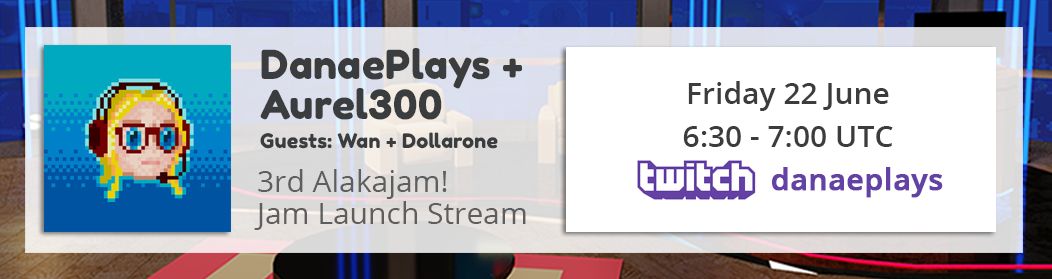
<style>
.page{position:relative;width:1052px;height:279px;background:#ffffff}
.page>*{position:absolute;margin:0}
.t1{font:20px/29px "FredokaOne-Regular";letter-spacing:0.01em;color:#3a3c3e}
.t2{font:40px/40px "FredokaOne-Regular";letter-spacing:0.01em;color:#3a3c3e}
.t3{font:30px/43px "OpenSans-Semibold";color:#3a3c3e}
.t4{font:30px/43px "OpenSans-Semibold";color:#6441a5;font-weight:bold}
.t5{font:30px/32px "OpenSans";color:#5e5e5e}
</style>
<div class="page">
<p class="t1" style="left:260px;top:48px;width:262px;height:101px"><span class="t2">DanaePlays +<br>Aurel300<br></span>Guests: Wan + Dollarone</p>
<p class="t3" style="left:683px;top:81px;width:260px;height:117px;text-align:center">Friday 22 June<br>6:30 - 7:00 UTC<br><span class="t4">                danaeplays</span></p>
<p class="t5" style="left:254px;top:169px;width:272px;height:61px">3rd Alakajam!<br>Jam Launch Stream</p>
</div>
